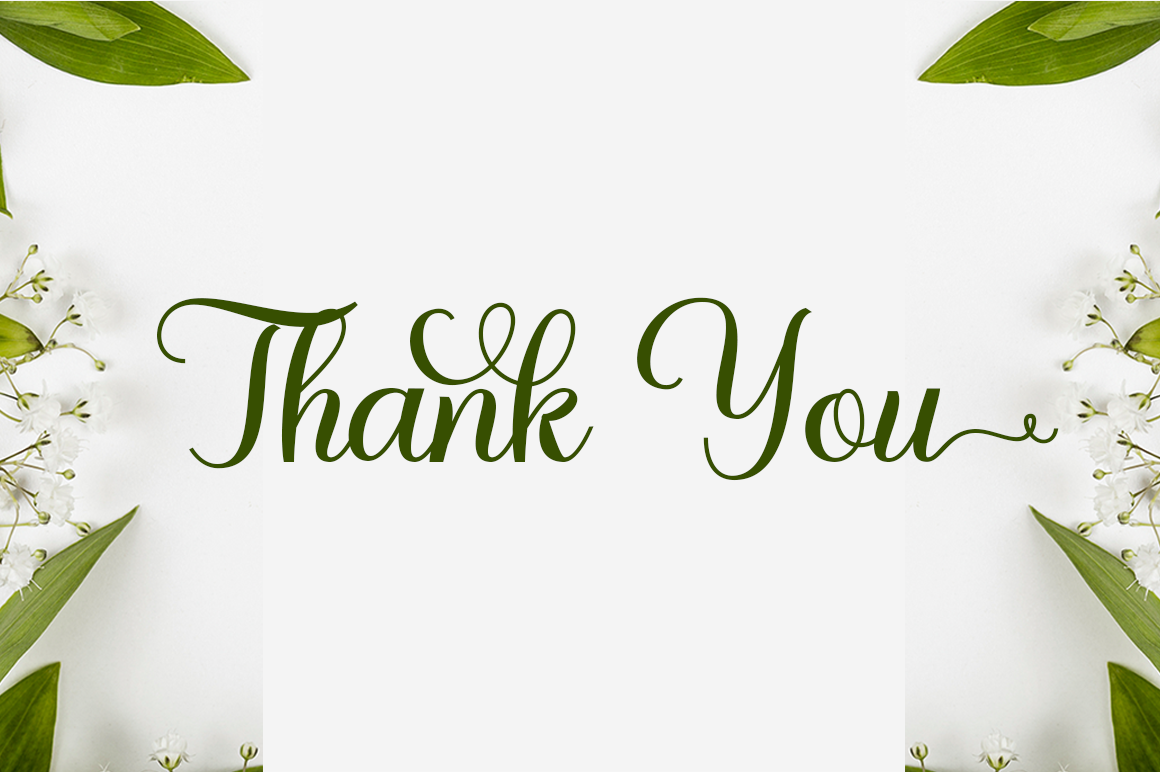
<style>
.page{position:relative;width:1160px;height:772px;background:#f4f4f4}
.page>*{position:absolute;margin:0}
.t1{font:153.3px "Whitney";color:#374f01}
</style>
<div class="page">
<p class="t1" style="left:157px;top:297px;width:902px;height:184px">Thank You</p>
</div>
